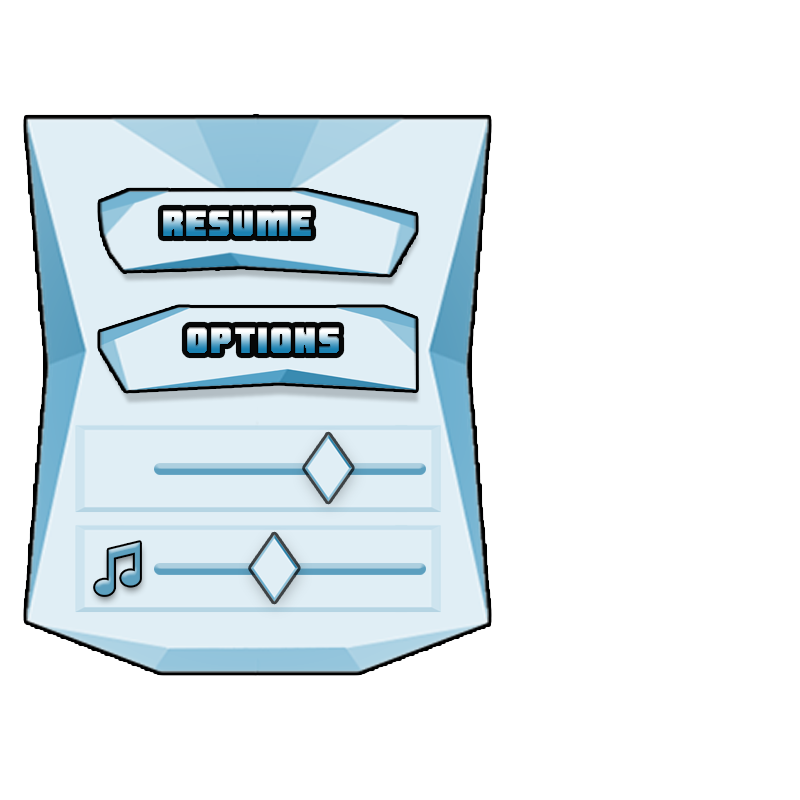
<style>
.page{position:relative;width:800px;height:800px;background:#ffffff}
.page>*{position:absolute;margin:0}
.t1{font:36.1px "Shumi";letter-spacing:0.05em}
.t2{font:36px "Shumi";letter-spacing:0.05em}
</style>
<div class="page">
<p class="t1" style="left:163px;top:210px;width:148px;height:26px">RESume</p>
<p class="t2" style="left:187px;top:327px;width:152px;height:26px">Options</p>
</div>
